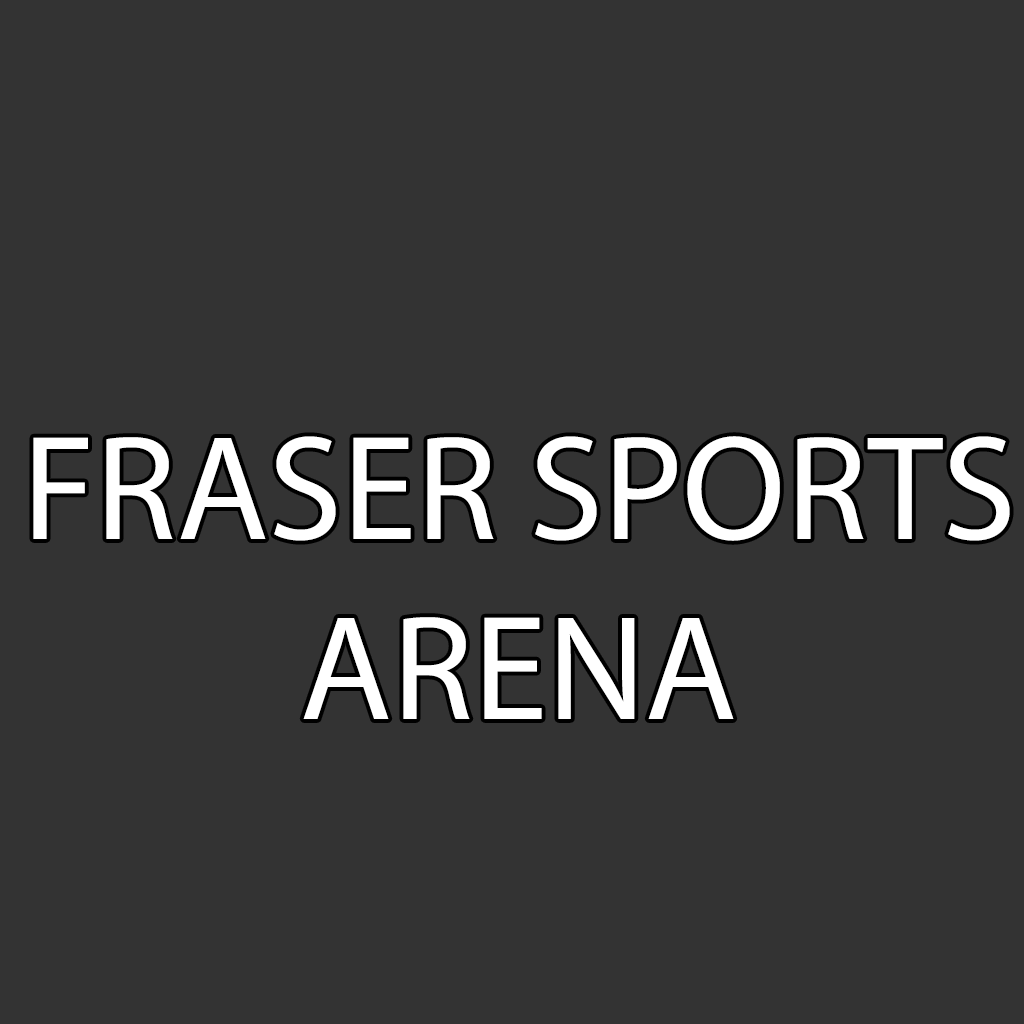
<style>
.page{position:relative;width:1024px;height:1024px;background:#333333}
.page>*{position:absolute;margin:0}
.t1{font:150px "MyriadPro-Regular";color:#ffffff}
</style>
<div class="page">
<p class="t1" style="left:33px;top:436px;width:977px;height:283px;text-align:center">FRASER SPORTS<br>ARENA</p>
</div>
